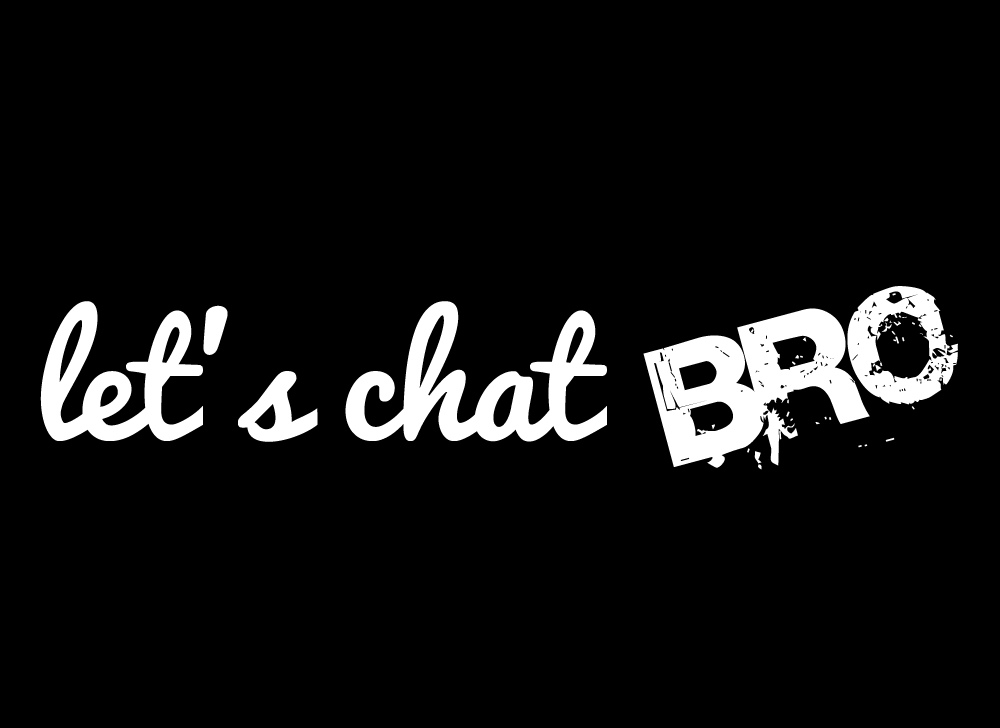
<style>
.page{position:relative;width:1000px;height:728px;background:#000000}
.page>*{position:absolute;margin:0}
.t1{font:148.1px "Base02";color:#ffffff}
.t2{font:149.4px "Pacifico-Regular";color:#ffffff}
</style>
<div class="page">
<p class="t1" style="left:643px;top:286px;width:315px;height:184px;rotate:-15deg">bro</p>
<p class="t2" style="left:40px;top:301px;width:567px;height:141px">let’s chat</p>
</div>
